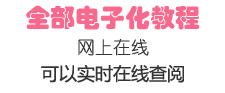
<style>
.page{position:relative;width:225px;height:93px;background:#ffffff}
.page>*{position:absolute;margin:0}
.t1{font:25px "STHupo";color:#f9688d}
.t2{font:18px "YouYuan";color:#343434}
.t3{font:18px "MicrosoftYaHei";color:#343434}
</style>
<div class="page">
<p class="t1" style="left:26px;top:5px;width:174px;height:25px">全部电子化教程</p>
<p class="t2" style="left:78px;top:38px;width:71px;height:18px">网上在线</p>
<p class="t3" style="left:41px;top:64px;width:143px;height:19px">可以实时在线查阅</p>
</div>
